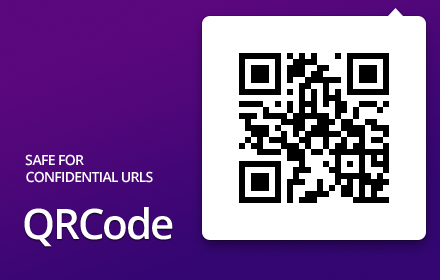
<style>
.page{position:relative;width:440px;height:280px;background:#ffffff}
.page>*{position:absolute;margin:0}
.t1{font:14px "OpenSans-Semibold";letter-spacing:-0.05em;color:#ffffff}
.t2{font:42px "OpenSans-Semibold";letter-spacing:-0.05em;color:#ffffff}
</style>
<div class="page">
<p class="t1" style="left:25px;top:154px;width:128px;height:29px">SAFE FOR<br>CONFIDENTIAL URLS</p>
<p class="t2" style="left:24px;top:207px;width:149px;height:40px">QRCode</p>
</div>
